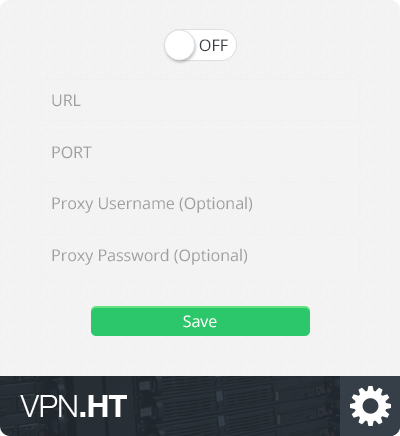
<style>
.page{position:relative;width:400px;height:436px;background:#f3f3f3}
.page>*{position:absolute;margin:0}
.t1{font:16px "OpenSans";color:#363f48;text-transform:uppercase}
.t2{font:16px "OpenSans";color:#9e9e9e}
.t3{font:16px "OpenSans";color:#ffffff}
</style>
<div class="page">
<p class="t1" style="left:199px;top:39px;width:29px;height:13px">off</p>
<p class="t2" style="left:52px;top:94px;width:29px;height:13px">URL</p>
<p class="t2" style="left:52px;top:146px;width:40px;height:13px">PORT</p>
<p class="t2" style="left:52px;top:196px;width:200px;height:17px">Proxy Username (Optional)</p>
<p class="t2" style="left:52px;top:248px;width:195px;height:17px">Proxy Password (Optional)</p>
<p class="t3" style="left:183px;top:315px;width:34px;height:13px">Save</p>
</div>
